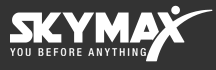
<style>
.page{position:relative;width:216px;height:70px;background:#333333}
.page>*{position:absolute;margin:0}
.t1{font:10.8px "HelveticaNeueLTStd-MdCn";letter-spacing:0.2em;color:#ffffff;text-transform:uppercase}
</style>
<div class="page">
<p class="t1" style="left:10px;top:48px;width:136px;height:8px">you before anything</p>
</div>
